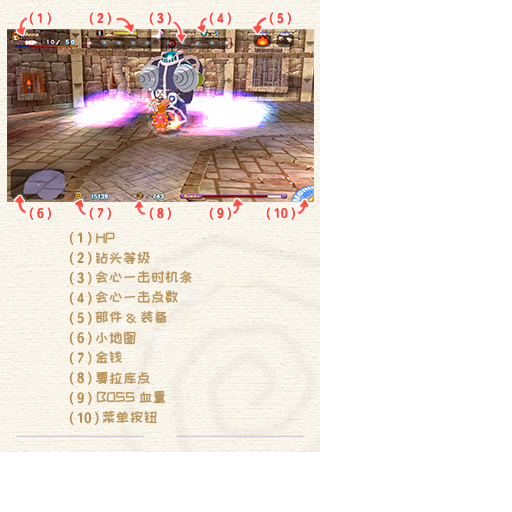
<style>
.page{position:relative;width:512px;height:512px;background:#ffffff}
.page>*{position:absolute;margin:0}
.t1{font:14px "HappyZcool-2016";color:#b89257}
</style>
<div class="page">
<p class="t1" style="left:95px;top:232px;width:20px;height:12px">HP</p>
<p class="t1" style="left:95px;top:251px;width:55px;height:14px">钻头等级</p>
<p class="t1" style="left:95px;top:270px;width:97px;height:14px">会心一击时机条</p>
<p class="t1" style="left:95px;top:290px;width:83px;height:14px">会心一击点数</p>
<p class="t1" style="left:95px;top:310px;width:72px;height:14px">部件&amp;装备</p>
<p class="t1" style="left:96px;top:331px;width:40px;height:14px">小地图</p>
<p class="t1" style="left:95px;top:351px;width:27px;height:13px">金钱</p>
<p class="t1" style="left:96px;top:371px;width:54px;height:14px">戛拉库点数</p>
<p class="t1" style="left:96px;top:390px;width:70px;height:14px">BOSS血量</p>
<p class="t1" style="left:102px;top:410px;width:55px;height:14px">菜单按钮</p>
</div>
